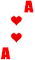
<style>
.page{position:relative;width:35px;height:60px;background:#ffffff}
.page>*{position:absolute;margin:0}
.t1{font:15px "Impact";color:#ff0000;scale:1.17 1}
</style>
<div class="page">
<p class="t1" style="left:24px;top:0px;width:10px;height:13px">A</p>
<p class="t1" style="left:1px;top:47px;width:10px;height:13px">A</p>
</div>
